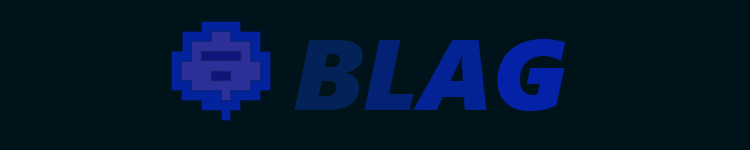
<style>
.page{position:relative;width:750px;height:150px;background:#00131a}
.page>*{position:absolute;margin:0}
.t1{font:100px "SegoeUIBlack-Italic";color:#032257}
.t2{font:100px "SegoeUIBlack-Italic";color:#032275}
.t3{font:100px "SegoeUIBlack-Italic";color:#032293}
.t4{font:100px "SegoeUIBlack-Italic";color:#0322a7}
</style>
<div class="page">
<p class="t1" style="left:294px;top:39px;width:271px;height:72px">B<span class="t2">L</span><span class="t3">A</span><span class="t4">G</span></p>
</div>
